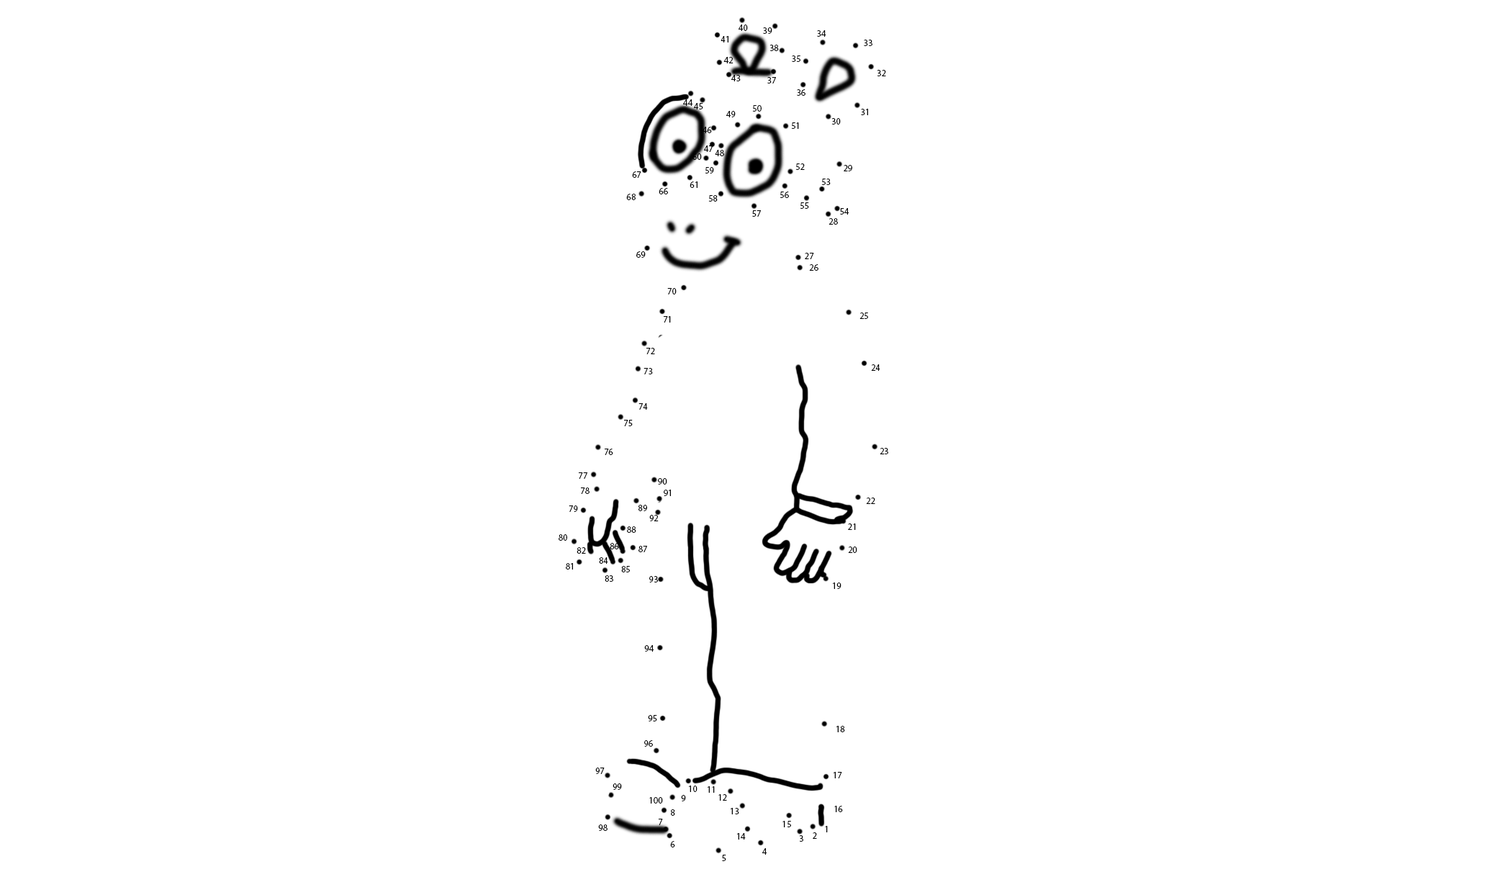
<style>
.page{position:relative;width:1490px;height:877px;background:#ffffff}
.page>*{position:absolute;margin:0}
.t1{font:9px "MyriadPro-Regular";color:#000000}
</style>
<div class="page">
<p class="t1" style="left:739px;top:24px;width:9px;height:7px">40</p>
<p class="t1" style="left:763px;top:27px;width:10px;height:7px">39</p>
<p class="t1" style="left:721px;top:36px;width:8px;height:6px">41</p>
<p class="t1" style="left:817px;top:30px;width:10px;height:7px">34</p>
<p class="t1" style="left:864px;top:40px;width:9px;height:6px">33</p>
<p class="t1" style="left:770px;top:45px;width:9px;height:6px">38</p>
<p class="t1" style="left:724px;top:57px;width:10px;height:6px">42</p>
<p class="t1" style="left:792px;top:55px;width:9px;height:7px">35</p>
<p class="t1" style="left:732px;top:75px;width:9px;height:6px">43</p>
<p class="t1" style="left:768px;top:77px;width:8px;height:7px">37</p>
<p class="t1" style="left:877px;top:70px;width:9px;height:6px">32</p>
<p class="t1" style="left:797px;top:89px;width:9px;height:7px">36</p>
<p class="t1" style="left:683px;top:99px;width:10px;height:7px">44</p>
<p class="t1" style="left:694px;top:103px;width:9px;height:6px">45</p>
<p class="t1" style="left:726px;top:111px;width:10px;height:6px">49</p>
<p class="t1" style="left:752px;top:105px;width:10px;height:7px">50</p>
<p class="t1" style="left:861px;top:109px;width:7px;height:6px">31</p>
<p class="t1" style="left:791px;top:122px;width:8px;height:7px">51</p>
<p class="t1" style="left:832px;top:118px;width:9px;height:7px">30</p>
<p class="t1" style="left:702px;top:127px;width:10px;height:6px">46</p>
<p class="t1" style="left:704px;top:145px;width:10px;height:7px">47</p>
<p class="t1" style="left:715px;top:150px;width:9px;height:6px">48</p>
<p class="t1" style="left:693px;top:153px;width:9px;height:7px">60</p>
<p class="t1" style="left:632px;top:171px;width:10px;height:7px">67</p>
<p class="t1" style="left:705px;top:167px;width:9px;height:7px">59</p>
<p class="t1" style="left:796px;top:163px;width:9px;height:7px">52</p>
<p class="t1" style="left:844px;top:165px;width:8px;height:6px">29</p>
<p class="t1" style="left:690px;top:181px;width:8px;height:7px">61</p>
<p class="t1" style="left:822px;top:179px;width:9px;height:6px">53</p>
<p class="t1" style="left:626px;top:194px;width:10px;height:6px">68</p>
<p class="t1" style="left:659px;top:188px;width:9px;height:6px">66</p>
<p class="t1" style="left:708px;top:195px;width:10px;height:7px">58</p>
<p class="t1" style="left:780px;top:192px;width:9px;height:6px">56</p>
<p class="t1" style="left:800px;top:202px;width:9px;height:7px">55</p>
<p class="t1" style="left:840px;top:208px;width:10px;height:7px">54</p>
<p class="t1" style="left:752px;top:210px;width:9px;height:7px">57</p>
<p class="t1" style="left:829px;top:218px;width:9px;height:7px">28</p>
<p class="t1" style="left:636px;top:251px;width:10px;height:7px">69</p>
<p class="t1" style="left:805px;top:253px;width:9px;height:6px">27</p>
<p class="t1" style="left:809px;top:264px;width:10px;height:7px">26</p>
<p class="t1" style="left:667px;top:288px;width:10px;height:6px">70</p>
<p class="t1" style="left:664px;top:316px;width:7px;height:7px">71</p>
<p class="t1" style="left:860px;top:312px;width:8px;height:7px">25</p>
<p class="t1" style="left:647px;top:348px;width:8px;height:6px">72</p>
<p class="t1" style="left:871px;top:364px;width:10px;height:7px">24</p>
<p class="t1" style="left:644px;top:368px;width:9px;height:6px">73</p>
<p class="t1" style="left:639px;top:403px;width:9px;height:7px">74</p>
<p class="t1" style="left:624px;top:420px;width:9px;height:6px">75</p>
<p class="t1" style="left:605px;top:449px;width:8px;height:6px">76</p>
<p class="t1" style="left:880px;top:448px;width:8px;height:6px">23</p>
<p class="t1" style="left:579px;top:472px;width:9px;height:7px">77</p>
<p class="t1" style="left:658px;top:478px;width:9px;height:7px">90</p>
<p class="t1" style="left:581px;top:487px;width:9px;height:7px">78</p>
<p class="t1" style="left:664px;top:490px;width:7px;height:6px">91</p>
<p class="t1" style="left:866px;top:498px;width:10px;height:6px">22</p>
<p class="t1" style="left:569px;top:505px;width:9px;height:7px">79</p>
<p class="t1" style="left:639px;top:505px;width:8px;height:6px">89</p>
<p class="t1" style="left:649px;top:515px;width:10px;height:6px">92</p>
<p class="t1" style="left:627px;top:526px;width:9px;height:7px">88</p>
<p class="t1" style="left:559px;top:534px;width:8px;height:7px">80</p>
<p class="t1" style="left:610px;top:543px;width:9px;height:6px">86</p>
<p class="t1" style="left:639px;top:546px;width:8px;height:6px">87</p>
<p class="t1" style="left:577px;top:547px;width:9px;height:7px">82</p>
<p class="t1" style="left:599px;top:557px;width:9px;height:7px">84</p>
<p class="t1" style="left:848px;top:546px;width:10px;height:7px">20</p>
<p class="t1" style="left:566px;top:563px;width:7px;height:7px">81</p>
<p class="t1" style="left:621px;top:566px;width:9px;height:6px">85</p>
<p class="t1" style="left:605px;top:575px;width:8px;height:7px">83</p>
<p class="t1" style="left:649px;top:576px;width:9px;height:6px">93</p>
<p class="t1" style="left:833px;top:582px;width:9px;height:7px">19</p>
<p class="t1" style="left:644px;top:645px;width:10px;height:7px">94</p>
<p class="t1" style="left:648px;top:715px;width:9px;height:6px">95</p>
<p class="t1" style="left:837px;top:726px;width:8px;height:6px">18</p>
<p class="t1" style="left:644px;top:740px;width:9px;height:7px">96</p>
<p class="t1" style="left:595px;top:768px;width:10px;height:6px">97</p>
<p class="t1" style="left:834px;top:772px;width:8px;height:6px">17</p>
<p class="t1" style="left:613px;top:783px;width:9px;height:7px">99</p>
<p class="t1" style="left:689px;top:786px;width:9px;height:6px">10</p>
<p class="t1" style="left:649px;top:797px;width:14px;height:7px">100</p>
<p class="t1" style="left:681px;top:795px;width:5px;height:6px">9</p>
<p class="t1" style="left:708px;top:786px;width:7px;height:7px">11</p>
<p class="t1" style="left:719px;top:794px;width:8px;height:7px">12</p>
<p class="t1" style="left:671px;top:809px;width:4px;height:7px">8</p>
<p class="t1" style="left:731px;top:808px;width:8px;height:6px">13</p>
<p class="t1" style="left:834px;top:806px;width:9px;height:6px">16</p>
<p class="t1" style="left:659px;top:819px;width:4px;height:6px">7</p>
<p class="t1" style="left:783px;top:821px;width:8px;height:6px">15</p>
<p class="t1" style="left:598px;top:824px;width:10px;height:7px">98</p>
<p class="t1" style="left:737px;top:833px;width:9px;height:7px">14</p>
<p class="t1" style="left:813px;top:832px;width:4px;height:7px">2</p>
<p class="t1" style="left:825px;top:826px;width:3px;height:6px">1</p>
<p class="t1" style="left:670px;top:841px;width:5px;height:6px">6</p>
<p class="t1" style="left:799px;top:835px;width:5px;height:7px">3</p>
<p class="t1" style="left:722px;top:855px;width:4px;height:6px">5</p>
<p class="t1" style="left:762px;top:848px;width:6px;height:7px">4</p>
</div>
